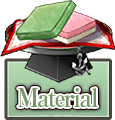
<style>
.page{position:relative;width:115px;height:120px;background:#ffffff}
.page>*{position:absolute;margin:0}
.t1{font:25px "RyuminPro-ExBold";letter-spacing:-0.08em;color:#759763;scale:0.9 1}
</style>
<div class="page">
<p class="t1" style="left:18px;top:88px;width:80px;height:19px">Material</p>
</div>
